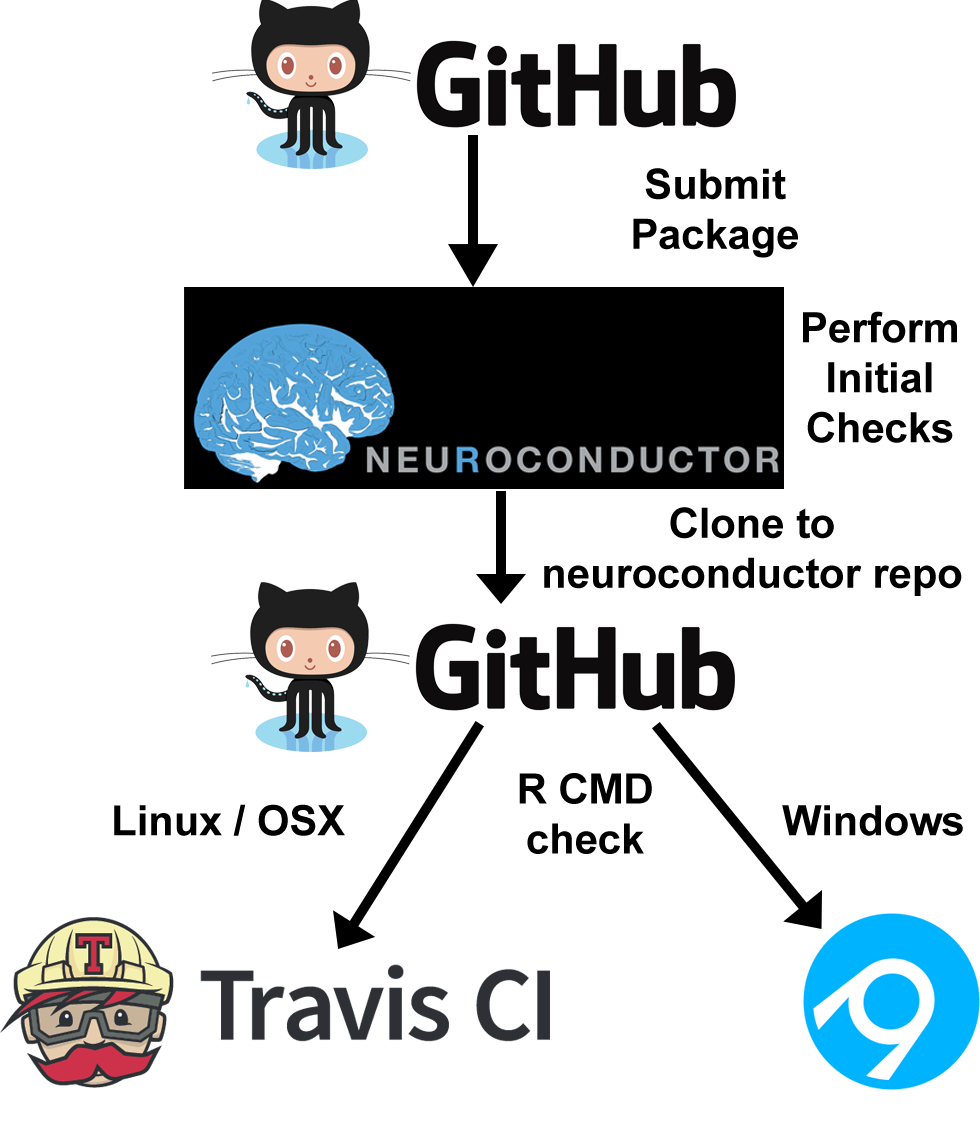
<style>
.page{position:relative;width:980px;height:1131px;background:#ffffff}
.page>*{position:absolute;margin:0}
.t1{font:41.7px "Arial-BoldMT";color:#000000}
</style>
<div class="page">
<p class="t1" style="left:633px;top:168px;width:165px;height:90px;text-align:center">Submit <br>Package</p>
<p class="t1" style="left:803px;top:311px;width:154px;height:132px;text-align:center">Perform<br>Initial Checks</p>
<p class="t1" style="left:544px;top:507px;width:418px;height:89px;text-align:center">Clone to <br>neuroconductor repo</p>
<p class="t1" style="left:519px;top:773px;width:133px;height:81px;text-align:center">R CMD check</p>
<p class="t1" style="left:114px;top:804px;width:231px;height:32px">Linux / OSX</p>
<p class="t1" style="left:782px;top:805px;width:181px;height:31px">Windows</p>
</div>
